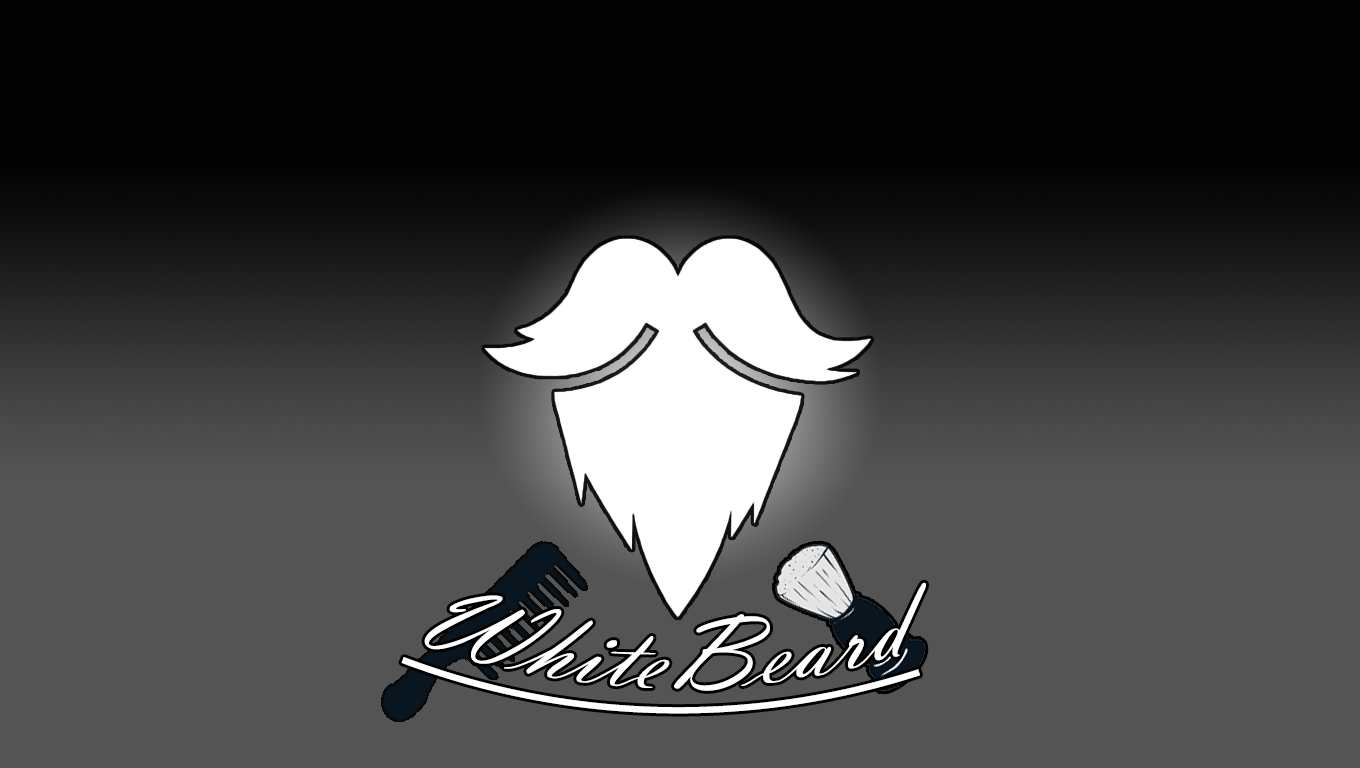
<style>
.page{position:relative;width:1360px;height:768px;background:#545454}
.page>*{position:absolute;margin:0}
.t1{font:103.8px "VladimirScript";color:#ffffff;text-decoration:underline}
</style>
<div class="page">
<p class="t1" style="left:401px;top:582px;width:525px;height:132px">WhiteBeard</p>
</div>
